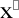
<style>
.page{position:relative;width:19px;height:18px;background:#ffffff}
.page>*{position:absolute;margin:0}
.t1{font:24px "TimesNewRomanPSMT";color:#000000;scale:1.09 1}
</style>
<div class="page">
<p class="t1" style="left:0px;top:7px;width:13px;height:11px">x</p>
</div>
